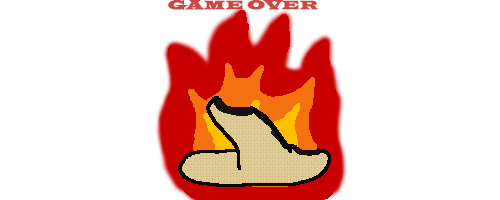
<style>
.page{position:relative;width:500px;height:200px;background:#ffffff}
.page>*{position:absolute;margin:0}
.t1{font:12.5px "LatinWide";color:#cc4746;text-transform:uppercase;font-weight:bold}
</style>
<div class="page">
<p class="t1" style="left:168px;top:0px;width:150px;height:10px">Game OVer</p>
</div>
